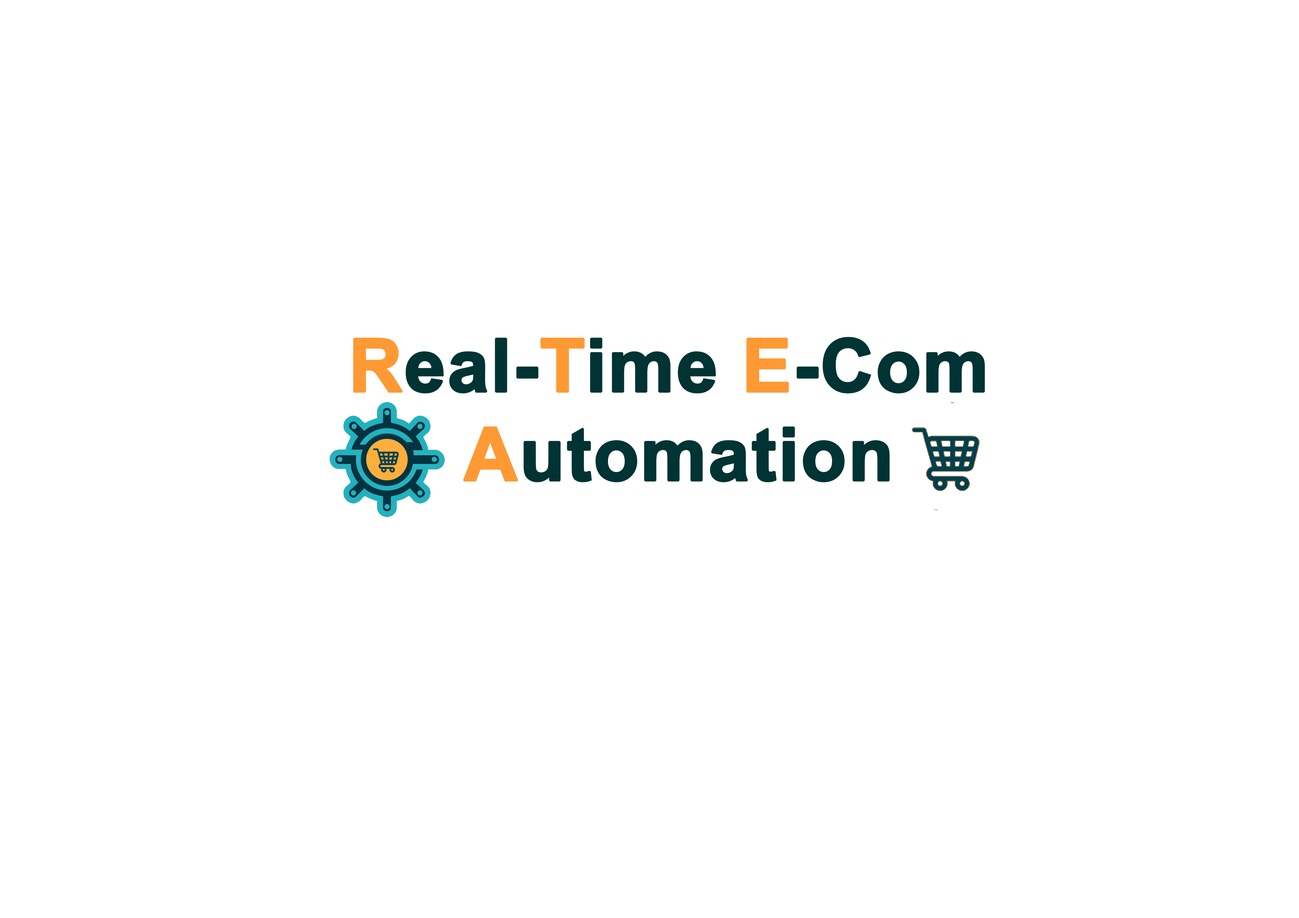
<style>
.page{position:relative;width:1299px;height:918px;background:#ffffff}
.page>*{position:absolute;margin:0}
.t1{font:74px "Arial-BoldMT";color:#003333;font-weight:bold}
.t2{font:74px "Arial-BoldMT";color:#ff9933;font-weight:bold}
</style>
<div class="page">
<p class="t1" style="left:353px;top:337px;width:632px;height:145px;text-align:center"><span class="t2">R</span>eal-<span class="t2">T</span>ime <span class="t2">E</span>-Com<br><span class="t2"> A</span>utomation</p>
</div>
